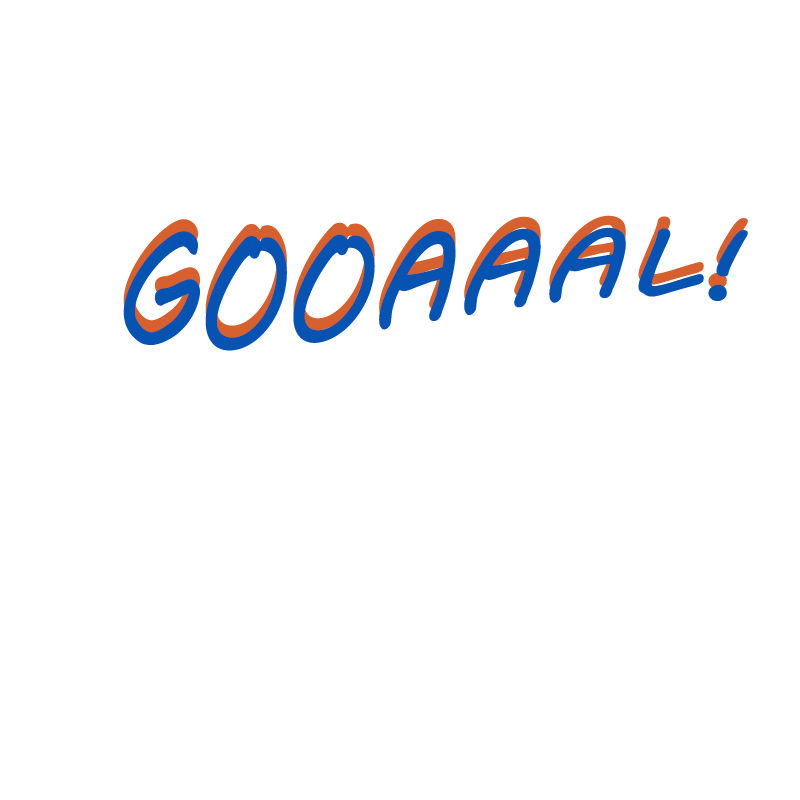
<style>
.page{position:relative;width:800px;height:800px;background:#ffffff}
.page>*{position:absolute;margin:0}
.t1{font:127.5px "MVBoli";letter-spacing:-0.01em}
.t2{font:127.5px "MVBoli";letter-spacing:-0.01em;color:#0653b1}
</style>
<div class="page">
<p class="t1" style="left:123px;top:215px;width:625px;height:124px">GOOAAAL!</p>
<p class="t2" style="left:123px;top:227px;width:625px;height:124px">GOOAAAL!</p>
</div>
